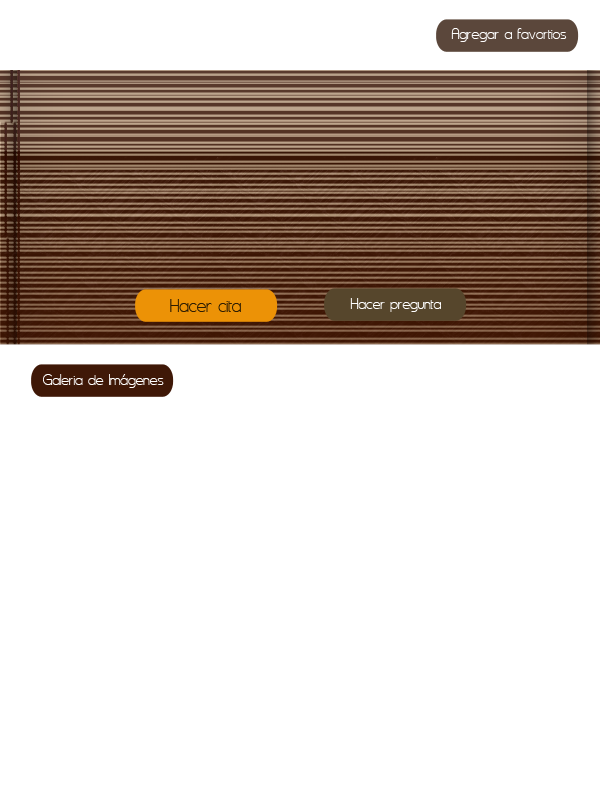
<style>
.page{position:relative;width:600px;height:800px;background:#ffffff}
.page>*{position:absolute;margin:0}
.t1{font:17.8px "Asenine";color:#ffffff}
.t2{font:21.7px "Asenine";color:#2e1d02}
</style>
<div class="page">
<p class="t1" style="left:451px;top:28px;width:116px;height:14px">Agregar a favortios</p>
<p class="t2" style="left:170px;top:299px;width:71px;height:13px">Hacer cita</p>
<p class="t1" style="left:350px;top:298px;width:91px;height:14px">Hacer pregunta</p>
<p class="t1" style="left:43px;top:374px;width:121px;height:14px">Galeria de Imágenes</p>
</div>
